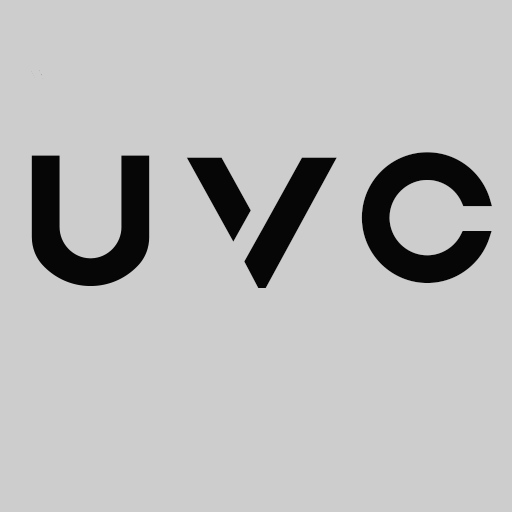
<style>
.page{position:relative;width:512px;height:512px;background:#cdcdcd}
.page>*{position:absolute;margin:0}
.t1{font:197.2px "AquireBold";color:#070606}
</style>
<div class="page">
<p class="t1" style="left:186px;top:157px;width:151px;height:131px">V</p>
<p class="t1" style="left:361px;top:152px;width:131px;height:131px">c</p>
</div>
